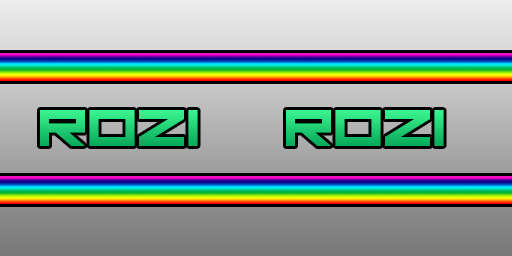
<style>
.page{position:relative;width:512px;height:256px}
.page>*{position:absolute;margin:0}
.t1{font:36px "DaMadRave"}
</style>
<div class="page">
<p class="t1" style="left:40px;top:110px;width:158px;height:36px">Rozi</p>
<p class="t1" style="left:286px;top:110px;width:158px;height:36px">Rozi</p>
</div>
